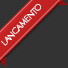
<style>
.page{position:relative;width:68px;height:68px;background:#333333}
.page>*{position:absolute;margin:0}
.t1{font:8.3px "FuturaBT-Light";color:#ffffff}
</style>
<div class="page">
<p class="t1" style="left:1px;top:4px;width:40px;height:42px;rotate:-46deg">LANCAMENTO</p>
</div>
